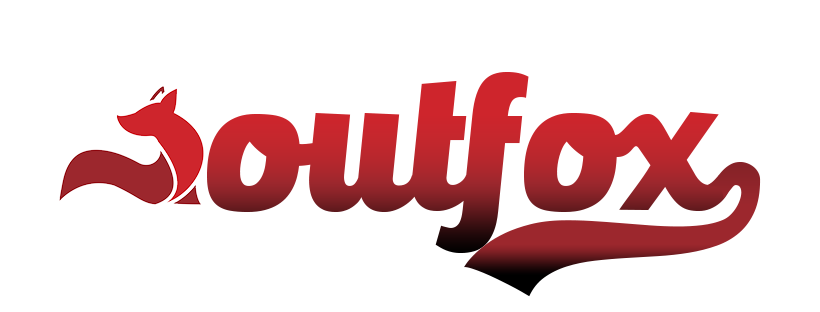
<style>
.page{position:relative;width:820px;height:312px;background:#ffffff}
.page>*{position:absolute;margin:0}
.t1{font:180px "BullettoKilla"}
</style>
<div class="page">
<p class="t1" style="left:207px;top:72px;width:524px;height:181px">outfox</p>
</div>
